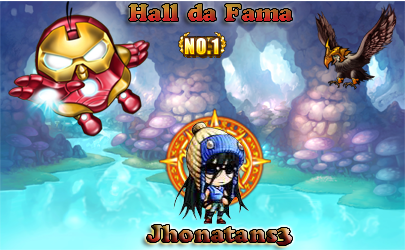
<style>
.page{position:relative;width:405px;height:250px}
.page>*{position:absolute;margin:0}
.t1{font:24px "CooperBlackStd"}
</style>
<div class="page">
<p class="t1" style="left:129px;top:4px;width:163px;height:17px">Hall da Fama</p>
<p class="t1" style="left:147px;top:225px;width:145px;height:20px">Jhonatans3</p>
</div>
